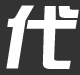
<style>
.page{position:relative;width:80px;height:75px;background:#333333}
.page>*{position:absolute;margin:0}
.t1{font:115.4px "HXBNRBJ";letter-spacing:0.2em;color:#ffffff;scale:0.66 1}
</style>
<div class="page">
<p class="t1" style="left:6px;top:5px;width:73px;height:64px">代</p>
</div>
